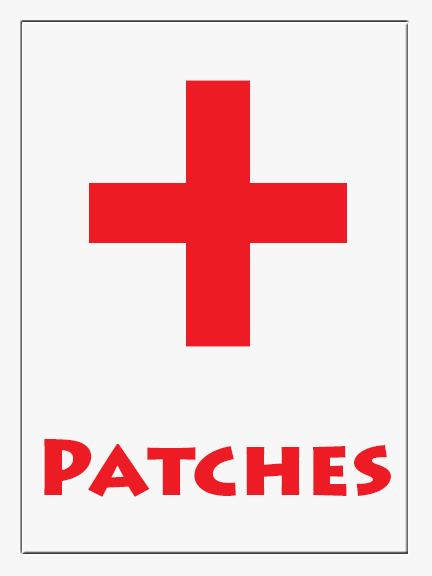
<style>
.page{position:relative;width:432px;height:576px;background:#f7f7f7}
.page>*{position:absolute;margin:0}
.t1{font:500px "LithosPro-Black";color:#ed1c24}
.t2{font:80px "LithosPro-Black";color:#ed1c24}
</style>
<div class="page">
<p class="t1" style="left:89px;top:80px;width:258px;height:267px">+</p>
<p class="t2" style="left:44px;top:439px;width:347px;height:58px">Patches</p>
</div>
